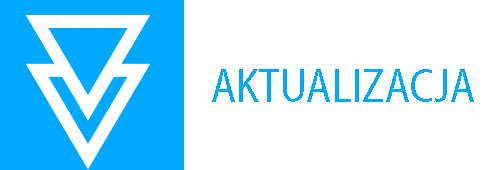
<style>
.page{position:relative;width:484px;height:170px;background:#ffffff}
.page>*{position:absolute;margin:0}
.t1{font:47.7px "MyriadPro-Regular";color:#00a8ff;scale:0.87 1}
</style>
<div class="page">
<p class="t1" style="left:212px;top:69px;width:262px;height:33px">AKTUALIZACJA</p>
</div>
